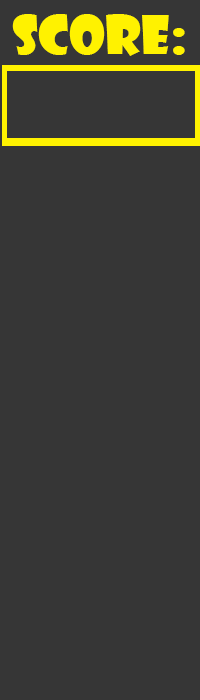
<style>
.page{position:relative;width:200px;height:700px;background:#363636}
.page>*{position:absolute;margin:0}
.t1{font:52px "ShowcardGothic-Reg";color:#fff200}
</style>
<div class="page">
<p class="t1" style="left:12px;top:14px;width:173px;height:42px">Score:</p>
</div>
